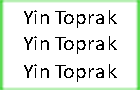
<style>
.page{position:relative;width:140px;height:90px;background:#ffffff}
.page>*{position:absolute;margin:0}
.t1{font:21.2px "Calibri";letter-spacing:-0.01em;color:#000000}
</style>
<div class="page">
<p class="t1" style="left:24px;top:10px;width:93px;height:18px">Yin Toprak</p>
<p class="t1" style="left:24px;top:36px;width:93px;height:18px">Yin Toprak</p>
<p class="t1" style="left:24px;top:64px;width:93px;height:18px">Yin Toprak</p>
</div>
